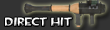
<style>
.page{position:relative;width:110px;height:30px;background:#333333}
.page>*{position:absolute;margin:0}
.t1{font:12px "TF2Build"}
</style>
<div class="page">
<p class="t1" style="left:5px;top:17px;width:67px;height:9px">Direct Hit</p>
</div>
